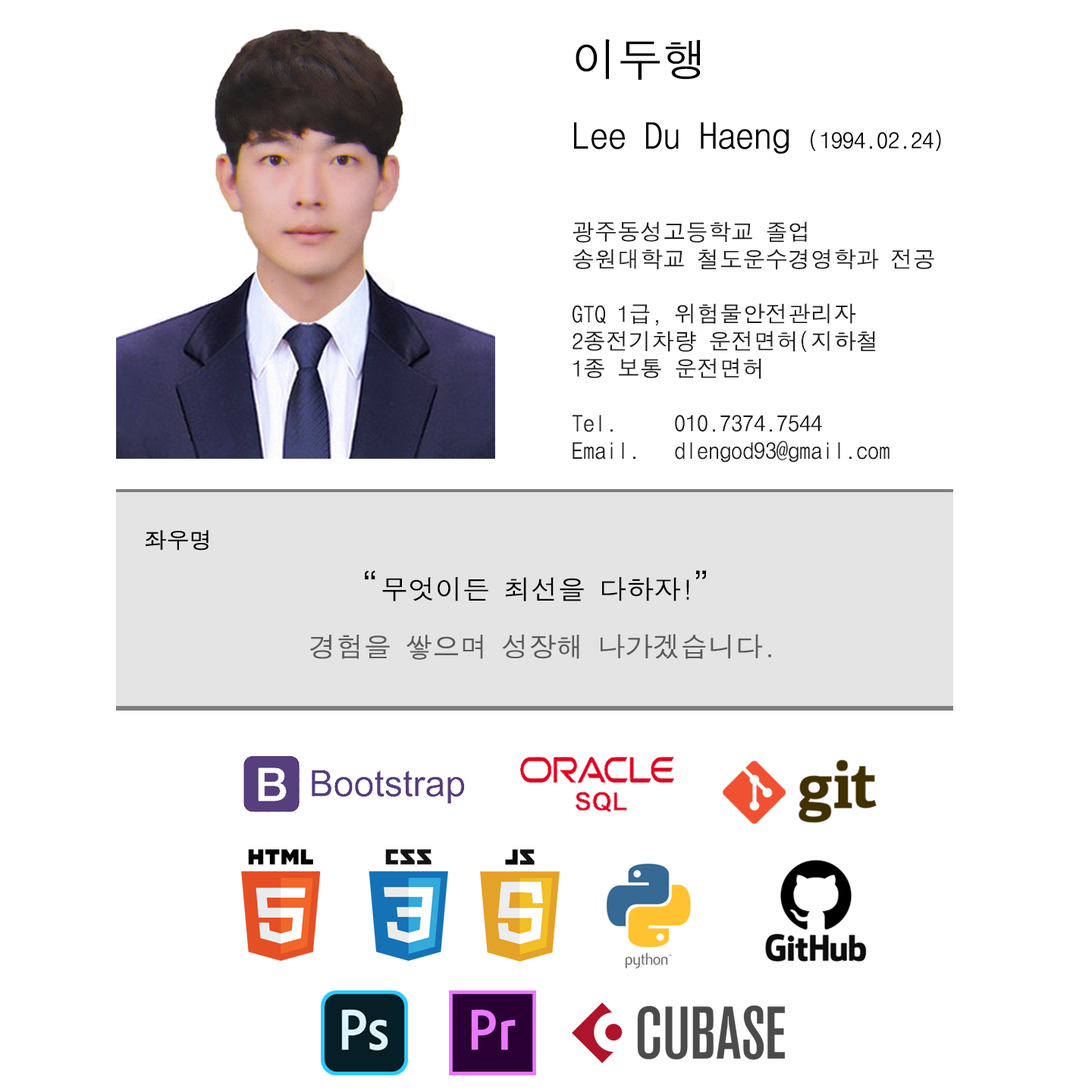
<style>
.page{position:relative;width:1092px;height:1092px;background:#ffffff}
.page>*{position:absolute;margin:0}
.t1{font:22.7px/27.3px "DotumChe";color:#1e1e1e}
.t2{font:45.5px "DotumChe";color:#000000}
.t3{font:36.4px "DotumChe";color:#000000}
.t4{font:22.7px "DotumChe";color:#000000}
</style>
<div class="page">
<p class="t1" style="left:573px;top:39px;width:368px;height:424px"><span class="t2">이두행<br></span><span class="t3">Lee Du Haeng </span><span class="t4">(1994.02.24)<br><br></span>광주동성고등학교 졸업<br>송원대학교 철도운수경영학과 전공<br><br>GTQ 1급, 위험물안전관리자<br>2종전기차량 운전면허(지하철<br>1종 보통 운전면허<br><br>Tel.     010.7374.7544<br>Email.   dlengod93@gmail.com</p>
</div>
